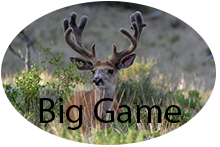
<style>
.page{position:relative;width:220px;height:147px;background:#ffffff}
.page>*{position:absolute;margin:0}
.t1{font:36px "MyriadPro-Regular";color:#000000}
</style>
<div class="page">
<p class="t1" style="left:39px;top:98px;width:142px;height:32px">Big Game</p>
</div>
